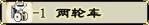
<style>
.page{position:relative;width:149px;height:25px;background:#d9d5bd}
.page>*{position:absolute;margin:0}
.t1{font:13.3px "LiSu";color:#161616;font-weight:bold}
.t2{font:15px "LiSu";color:#161616;font-weight:bold}
</style>
<div class="page">
<p class="t1" style="left:32px;top:8px;width:14px;height:10px">-1</p>
<p class="t2" style="left:55px;top:8px;width:47px;height:11px">两轮车</p>
</div>
